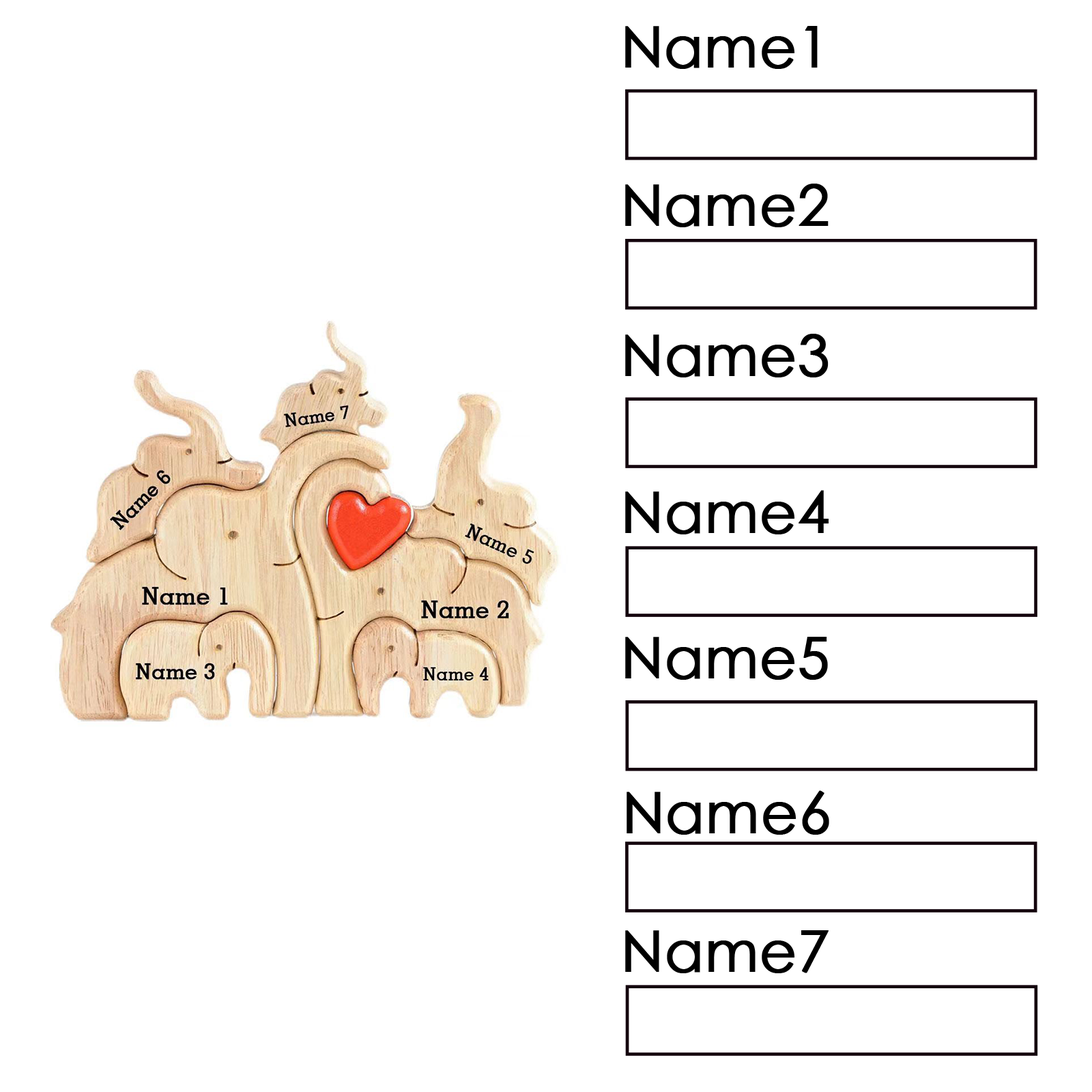
<style>
.page{position:relative;width:1092px;height:1092px;background:#ffffff}
.page>*{position:absolute;margin:0}
.t1{font:56.7px "STXihei";color:#000000;font-weight:bold}
</style>
<div class="page">
<p class="t1" style="left:625px;top:26px;width:193px;height:43px">Name1</p>
<p class="t1" style="left:625px;top:184px;width:204px;height:43px">Name2</p>
<p class="t1" style="left:625px;top:334px;width:204px;height:43px">Name3</p>
<p class="t1" style="left:625px;top:490px;width:204px;height:44px">Name4</p>
<p class="t1" style="left:625px;top:637px;width:203px;height:43px">Name5</p>
<p class="t1" style="left:627px;top:790px;width:202px;height:45px">Name6</p>
<p class="t1" style="left:625px;top:930px;width:204px;height:43px">Name7</p>
</div>
